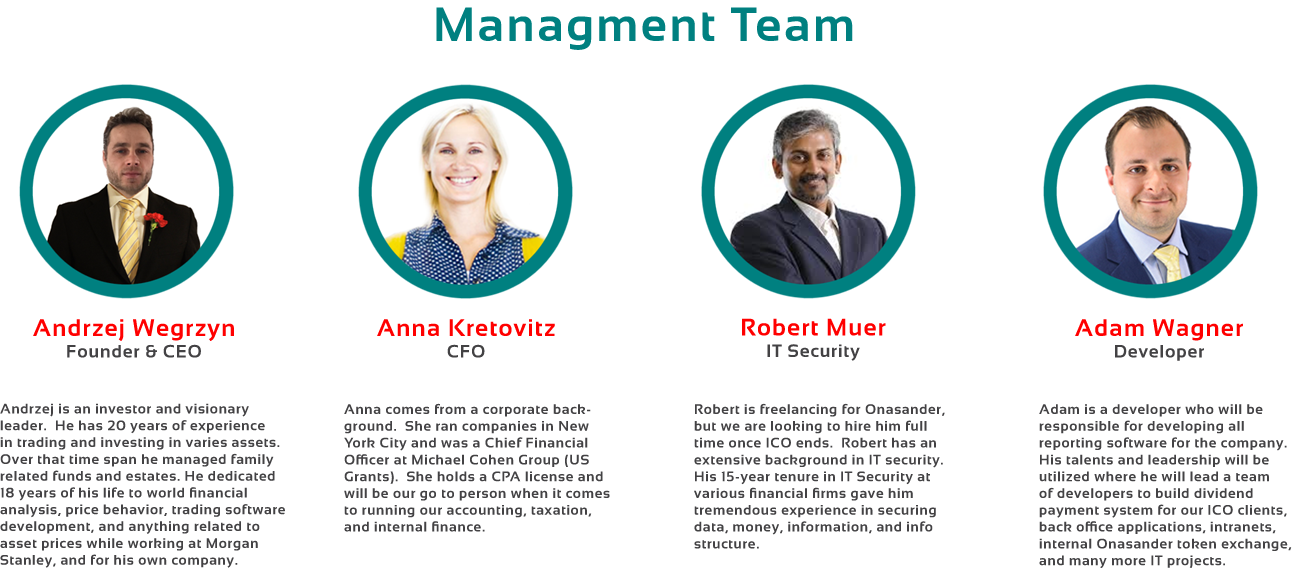
<style>
.page{position:relative;width:1292px;height:568px;background:#ffffff}
.page>*{position:absolute;margin:0}
.t1{font:48px "Sansation-Bold";letter-spacing:0.05em;color:#008080}
.t2{font:24px "Sansation-Bold";letter-spacing:0.05em;color:#ff0000}
.t3{font:18px "Sansation-Bold";letter-spacing:0.05em;color:#434244}
.t4{font:14px "Sansation-Bold";letter-spacing:0.05em;color:#434244}
</style>
<div class="page">
<p class="t1" style="left:436px;top:7px;width:417px;height:43px">Managment Team</p>
<p class="t2" style="left:742px;top:318px;width:144px;height:43px;text-align:center">Robert Muer<br><span class="t3">IT Security</span></p>
<p class="t2" style="left:33px;top:319px;width:201px;height:39px;text-align:center">Andrzej Wegrzyn<br><span class="t3">Founder &amp; CEO</span></p>
<p class="t2" style="left:377px;top:319px;width:178px;height:39px;text-align:center">Anna Kretovitz<br><span class="t3">CFO</span></p>
<p class="t2" style="left:1075px;top:319px;width:168px;height:42px;text-align:center">Adam Wagner<br><span class="t3">Developer</span></p>
<p class="t4" style="left:0px;top:403px;width:285px;height:165px">Andrzej is an investor and visionary<br>leader.  He has 20 years of experience<br>in trading and investing in varies assets.<br>Over that time span he managed family<br>related funds and estates. He dedicated<br>18 years of his life to world financial<br>analysis, price behavior, trading software<br>development, and anything related to <br>asset prices while working at Morgan <br>Stanley, and for his own company.</p>
<p class="t4" style="left:344px;top:403px;width:266px;height:129px">Anna comes from a corporate back-<br>ground.  She ran companies in New<br>York City and was a Chief Financial<br>Officer at Michael Cohen Group (US <br>Grants).  She holds a CPA license and<br>will be our go to person when it comes<br>to running our accounting, taxation, <br>and internal finance.</p>
<p class="t4" style="left:694px;top:403px;width:251px;height:146px">Robert is freelancing for Onasander,<br>but we are looking to hire him full <br>time once ICO ends.  Robert has an <br>extensive background in IT security.<br>His 15-year tenure in IT Security at<br>various financial firms gave him <br>tremendous experience in securing <br>data, money, information, and info <br>structure.</p>
<p class="t4" style="left:1039px;top:404px;width:253px;height:165px">Adam is a developer who will be <br>responsible for developing all <br>reporting software for the company.  <br>His talents and leadership will be <br>utilized where he will lead a team <br>of developers to build dividend <br>payment system for our ICO clients, <br>back office applications, intranets, <br>internal Onasander token exchange, <br>and many more IT projects.</p>
</div>
